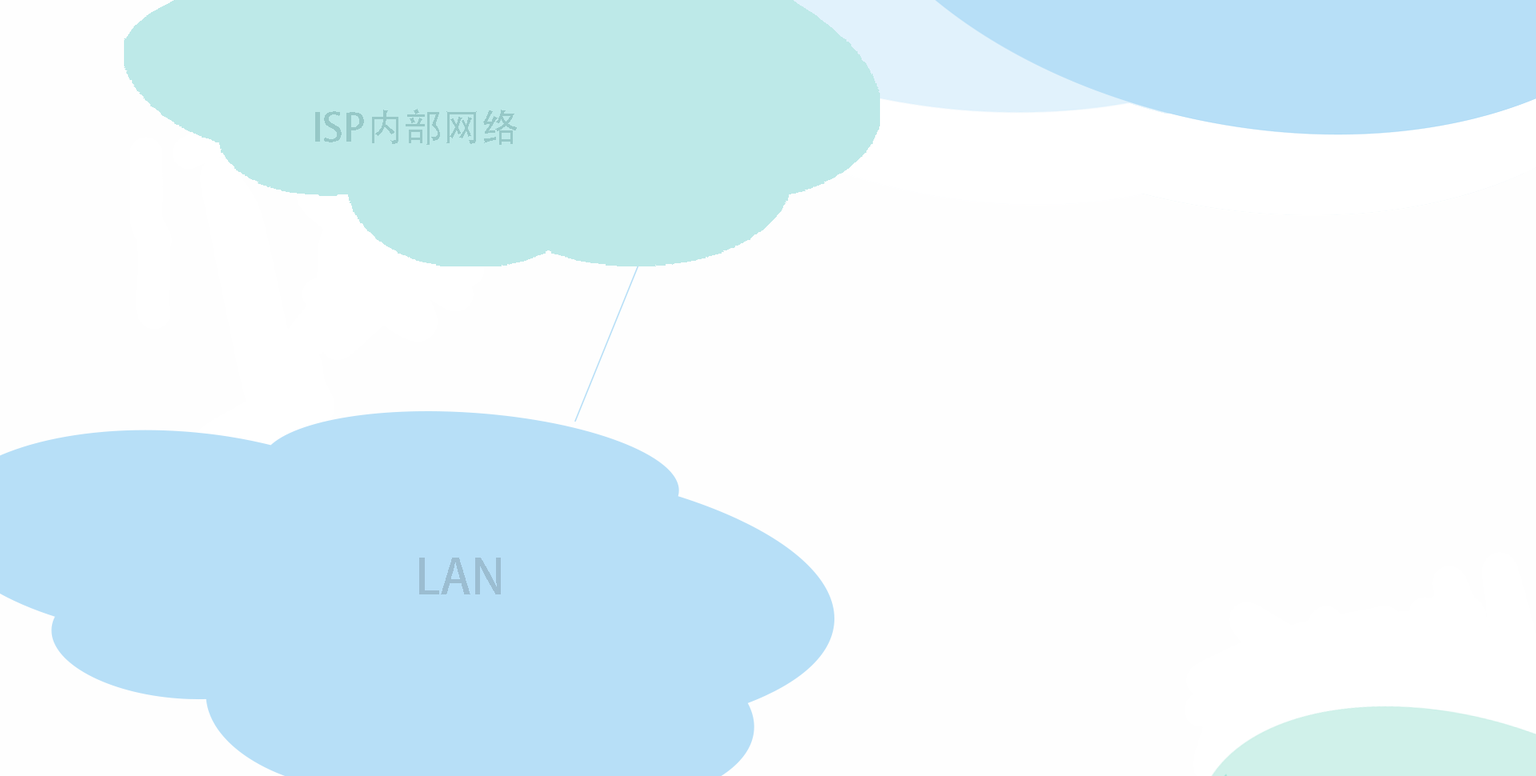
<style>
.page{position:relative;width:1536px;height:776px;background:#fefefe}
.page>*{position:absolute;margin:0}
.t1{font:38.4px "AdobeHeitiStd-Regular";color:#96c8c7}
.t2{font:48px "AdobeHeitiStd-Regular";color:#9bbdd1}
</style>
<div class="page">
<p class="t1" style="left:315px;top:109px;width:202px;height:36px">ISP内部网络</p>
<p class="t2" style="left:419px;top:558px;width:82px;height:37px">LAN</p>
</div>
